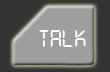
<style>
.page{position:relative;width:110px;height:72px;background:#9f9e9e}
.page>*{position:absolute;margin:0}
.t1{font:26px "DS-Digital";letter-spacing:-0.025em;color:#ffffff}
</style>
<div class="page">
<p class="t1" style="left:39px;top:29px;width:47px;height:19px">TALK</p>
</div>
